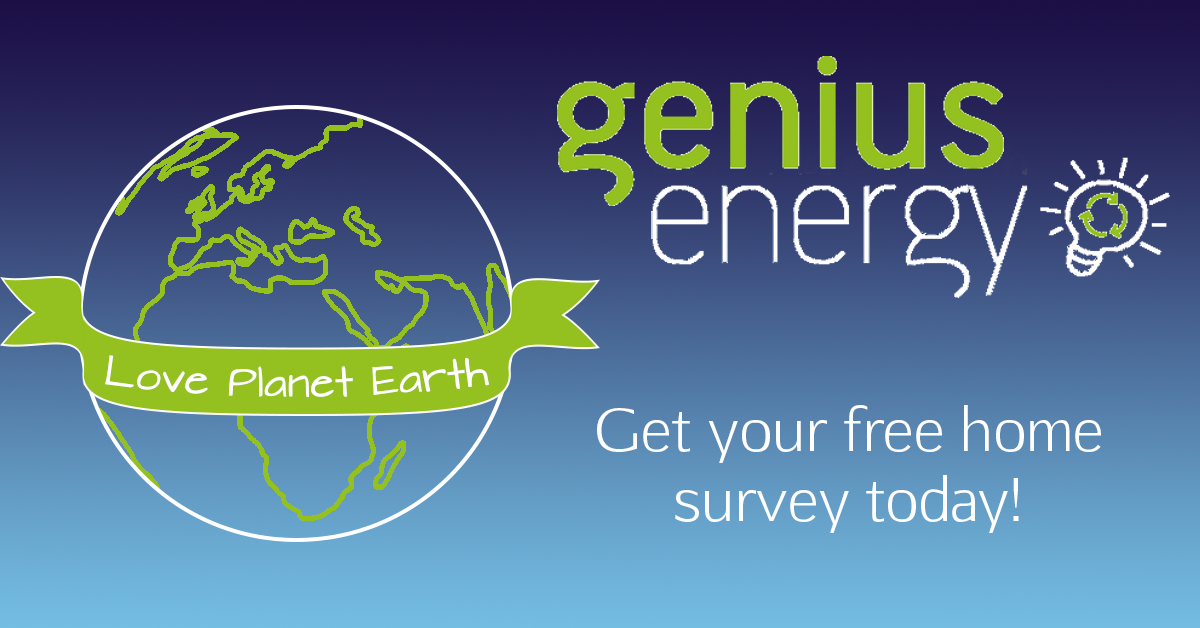
<style>
.page{position:relative;width:1200px;height:628px}
.page>*{position:absolute;margin:0}
.t1{font:36px "ArchitectsDaughter";color:#ffffff}
.t2{font:58.4px "Aftasans";color:#ffffff}
</style>
<div class="page">
<p class="t1" style="left:104px;top:355px;width:386px;height:43px">Love Planet Earth</p>
<p class="t2" style="left:597px;top:405px;width:504px;height:128px;text-align:center">Get your free home survey today!</p>
</div>
